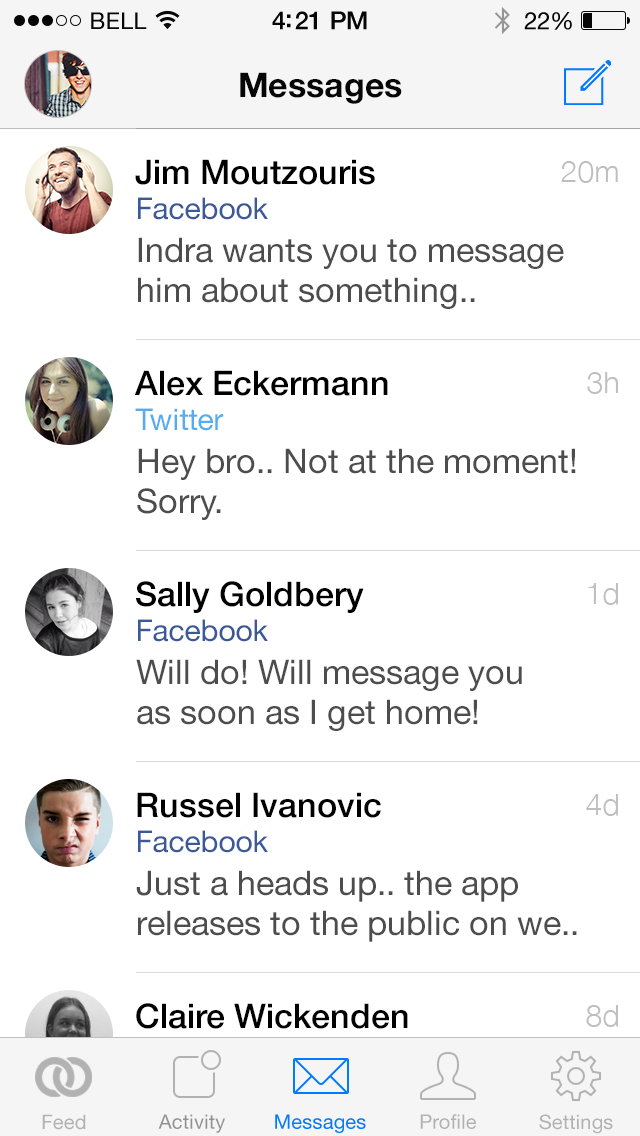
<style>
.page{position:relative;width:640px;height:1136px;background:#ffffff}
.page>*{position:absolute;margin:0}
.t1{font:23px "HelveticaNeue";letter-spacing:0.02em;color:#060606}
.t2{font:25px "HelveticaNeue-Medium";letter-spacing:-0.02em;color:#060606}
.t3{font:24px "HelveticaNeue";letter-spacing:-0.02em;color:#060606}
.t4{font:34px "HelveticaNeue-Bold";color:#060606}
.t5{font:34px "HelveticaNeue-Medium";color:#000000}
.t6{font:30px "HelveticaNeue-Light";color:#bebebe}
.t7{font:30px "HelveticaNeue";color:#3b5998}
.t8{font:34px "HelveticaNeue";color:#4d4d4d}
.t9{font:30px "HelveticaNeue";color:#55acee}
.t10{font:20px "HelveticaNeue";letter-spacing:0.01em;color:#b2b2b2}
.t11{font:20px "HelveticaNeue";letter-spacing:0.01em;color:#929292}
.t12{font:20px "HelveticaNeue";letter-spacing:0.01em;color:#007aff}
</style>
<div class="page">
<p class="t1" style="left:91px;top:12px;width:56px;height:17px">BELL</p>
<p class="t2" style="left:272px;top:11px;width:95px;height:19px">4:21 PM</p>
<p class="t3" style="left:524px;top:12px;width:48px;height:18px">22%</p>
<p class="t4" style="left:240px;top:72px;width:162px;height:32px">Messages</p>
<p class="t5" style="left:135px;top:159px;width:240px;height:26px">Jim Moutzouris</p>
<p class="t6" style="left:561px;top:161px;width:57px;height:22px">20m</p>
<p class="t7" style="left:138px;top:197px;width:130px;height:23px">Facebook</p>
<p class="t8" style="left:138px;top:237px;width:426px;height:72px">Indra wants you to message<br>him about something..</p>
<p class="t5" style="left:134px;top:370px;width:254px;height:26px">Alex Eckermann</p>
<p class="t6" style="left:587px;top:372px;width:31px;height:22px">3h</p>
<p class="t9" style="left:135px;top:408px;width:89px;height:23px">Twitter</p>
<p class="t8" style="left:137px;top:448px;width:439px;height:72px">Hey bro.. Not at the moment!<br>Sorry.</p>
<p class="t5" style="left:136px;top:581px;width:228px;height:32px">Sally Goldbery</p>
<p class="t6" style="left:588px;top:583px;width:30px;height:22px">1d</p>
<p class="t7" style="left:138px;top:619px;width:130px;height:23px">Facebook</p>
<p class="t8" style="left:136px;top:659px;width:386px;height:72px">Will do! Will message you<br>as soon as I get home!</p>
<p class="t5" style="left:137px;top:792px;width:244px;height:26px">Russel Ivanovic</p>
<p class="t6" style="left:586px;top:794px;width:32px;height:22px">4d</p>
<p class="t7" style="left:138px;top:830px;width:130px;height:23px">Facebook</p>
<p class="t8" style="left:136px;top:870px;width:441px;height:72px">Just a heads up.. the app<br>releases to the public on we..</p>
<p class="t5" style="left:136px;top:1003px;width:272px;height:26px">Claire Wickenden</p>
<p class="t6" style="left:586px;top:1005px;width:32px;height:22px">8d</p>
<p class="t10" style="left:42px;top:1114px;width:44px;height:16px">Feed</p>
<p class="t11" style="left:158px;top:1114px;width:67px;height:19px">Activity</p>
<p class="t12" style="left:275px;top:1114px;width:91px;height:19px">Messages</p>
<p class="t10" style="left:420px;top:1114px;width:56px;height:15px">Profile</p>
<p class="t10" style="left:539px;top:1114px;width:74px;height:20px">Settings</p>
</div>
